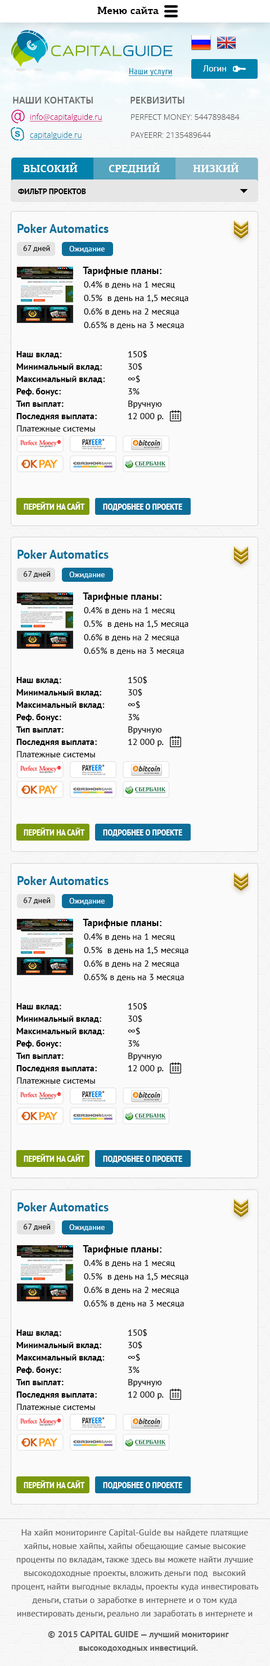
<style>
.page{position:relative;width:270px;height:1666px;background:#fafafa}
.page>*{position:absolute;margin:0}
.t1{font:10.1px "PFCentroSlabPro-Bold";color:#000000}
.t2{font:9px "PTSans-Regular";color:#ffffff}
.t3{font:9px "PTSans-Narrow";letter-spacing:0.04em;color:#0082ac;text-decoration:underline}
.t4{font:9px "OpenSans-Semibold";color:#656565;text-transform:uppercase}
.t5{font:7.9px "OpenSans-Light";color:#cb0069;text-decoration:underline}
.t6{font:7.9px "OpenSans-Light";color:#545454}
.t7{font:7.9px "OpenSans-Light";color:#0082ac;text-decoration:underline}
.t8{font:10.1px "PFCentroSlabPro-Bold";color:#ffffff}
.t9{font:7.9px "PTSans-Bold";color:#000000;text-transform:uppercase}
.t10{font:12.4px "PTSans-Bold";color:#0e6e9a}
.t11{font:7.9px "PTSans-Regular";color:#000000}
.t12{font:7.9px "PTSans-Regular";color:#ffffff}
.t13{font:9px/13.5px "PTSans-Regular";color:#000000}
.t14{font:10.1px/13.5px "PTSans-Bold";color:#000000}
.t15{font:9px/12.4px "PTSans-Bold";color:#000000}
.t16{font:9px/12.4px "PTSans-Regular";color:#000000}
.t17{font:9px "PTSans-NarrowBold";color:#ffffff;text-transform:uppercase}
.t18{font:9px/13.5px "PTSans-Regular";color:#616161}
.t19{font:9px/13.5px "PTSans-Bold";color:#616161}
</style>
<div class="page">
<p class="t1" style="left:97px;top:6px;width:62px;height:8px">Меню сайта</p>
<p class="t2" style="left:202px;top:65px;width:24px;height:6px">Логин</p>
<p class="t3" style="left:129px;top:68px;width:44px;height:8px">Наши услуги</p>
<p class="t4" style="left:13px;top:97px;width:80px;height:7px">Наши контакты</p>
<p class="t4" style="left:130px;top:97px;width:54px;height:7px">Реквизиты</p>
<p class="t5" style="left:30px;top:114px;width:72px;height:8px">info@capitalguide.ru</p>
<p class="t6" style="left:131px;top:114px;width:109px;height:6px">PERFECT MONEY: 5447898484</p>
<p class="t7" style="left:30px;top:132px;width:52px;height:8px">capitalguide.ru</p>
<p class="t6" style="left:131px;top:132px;width:80px;height:6px">PAYEERR: 2135489644</p>
<p class="t8" style="left:23px;top:162px;width:55px;height:10px">ВЫСОКИЙ</p>
<p class="t8" style="left:109px;top:162px;width:51px;height:11px">СРЕДНИЙ</p>
<p class="t8" style="left:193px;top:162px;width:45px;height:10px">НИЗКИЙ</p>
<p class="t9" style="left:18px;top:188px;width:68px;height:6px">Фильтр проектов</p>
<p class="t10" style="left:17px;top:224px;width:92px;height:9px">Poker Automatics</p>
<p class="t11" style="left:23px;top:245px;width:27px;height:7px">67 дней</p>
<p class="t12" style="left:69px;top:246px;width:36px;height:7px">Ожидание</p>
<p class="t13" style="left:83px;top:267px;width:105px;height:62px"><span class="t14">Тарифные планы:<br></span>0.4% в день на 1 месяц<br>0.5%  в день на 1,5 месяца<br>0.6% в день на 2 месяца<br>0.65% в день на 3 месяца</p>
<p class="t15" style="left:16px;top:351px;width:89px;height:80px">Наш вклад: <br>Минимальный вклад: <br>Максимальный вклад: <br>Реф. бонус: <br>Тип выплат:<br>Последняя выплата:<br><span class="t16">Платежные системы</span></p>
<p class="t16" style="left:128px;top:350px;width:36px;height:71px">150$<br>30$<br>∞$<br>3% <br>Вручную<br>12 000 р.</p>
<p class="t17" style="left:24px;top:502px;width:61px;height:8px">Перейти на сайт</p>
<p class="t17" style="left:103px;top:503px;width:79px;height:8px">Подробнее о проекте</p>
<p class="t18" style="left:12px;top:1529px;width:246px;height:89px;text-align:center">На хайп мониторинге Capital-Guide вы найдете платящие хайпы, новые хайпы, хайпы обещающие самые высокие проценты по вкладам, также здесь вы можете найти лучшие высокодоходные проекты, вложить деньги под  высокий процент, найти выгодные вклады, проекты куда инвестировать деньги, статьи о заработке в интернете и о том куда инвестировать деньги, реально ли заработать в интернете и куда лучше вложить деньги, как правильно вкладывать деньги, что такое финансовая пирамида и что такое хайп.</p>
<p class="t19" style="left:48px;top:1631px;width:181px;height:21px;text-align:center">© 2015 CAPITAL GUIDE — лучший мониторинг <br>высокодоходных инвестиций.</p>
</div>
